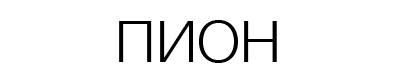
<style>
.page{position:relative;width:400px;height:80px;background:#ffffff}
.page>*{position:absolute;margin:0}
.t1{font:58.3px "HelveticaNeue-Light";color:#000000}
</style>
<div class="page">
<p class="t1" style="left:119px;top:20px;width:158px;height:43px">ПИОН</p>
</div>
